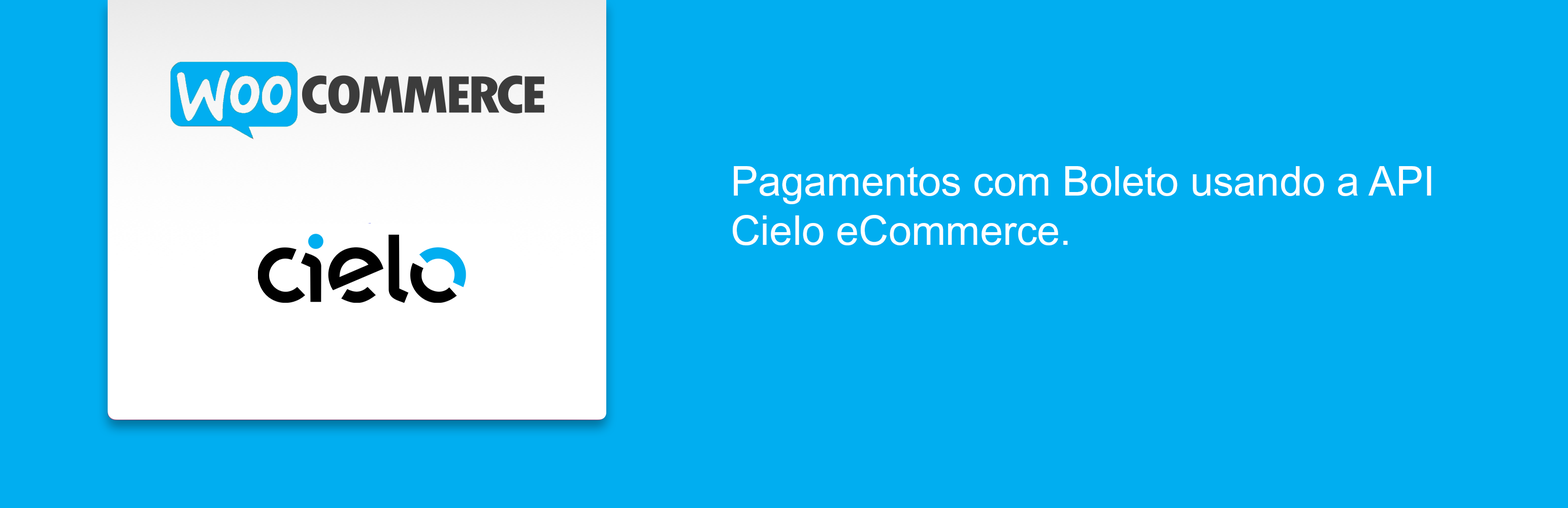
<style>
.page{position:relative;width:1568px;height:508px;background:#01aef0}
.page>*{position:absolute;margin:0}
.t1{font:41.1px "DokChampa";color:#ffffff}
</style>
<div class="page">
<p class="t1" style="left:733px;top:166px;width:698px;height:79px">Pagamentos com Boleto usando a API Cielo eCommerce.</p>
</div>
